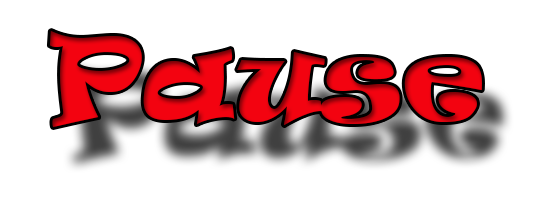
<style>
.page{position:relative;width:540px;height:202px;background:#ffffff}
.page>*{position:absolute;margin:0}
.t1{font:110px "Ravie";color:#e60721}
</style>
<div class="page">
<p class="t1" style="left:49px;top:31px;width:433px;height:96px">Pause</p>
</div>
